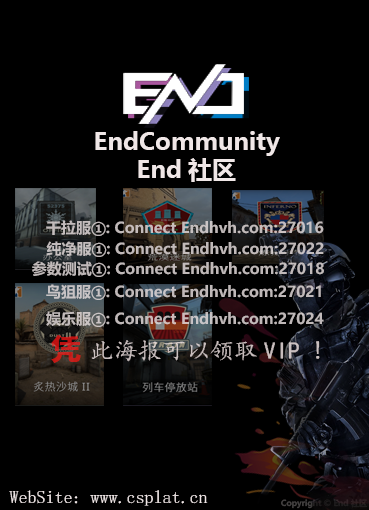
<style>
.page{position:relative;width:369px;height:510px;background:#000000}
.page>*{position:absolute;margin:0}
.t1{font:24px "MicrosoftYaHei-Bold";color:#f0e7e7}
.t2{font:15px "MicrosoftYaHei-Bold";color:#c3bbbb}
.t3{font:15px "MicrosoftYaHei-Bold";color:#c1baba}
.t4{font:15px "MicrosoftYaHei-Bold";color:#bfb8b8}
.t5{font:15px "MicrosoftYaHei-Bold";color:#c1b9ba}
.t6{font:24px "¿¬Ìå"}
.t7{font:30px "MicrosoftYaHei-Bold"}
.t8{font:18px "·ÂËÎ";color:#f0e7e7}
.t9{font:8px "MicrosoftYaHei-Bold";color:#2d2022}
</style>
<div class="page">
<p class="t1" style="left:95px;top:131px;width:185px;height:25px">EndCommunity</p>
<p class="t1" style="left:138px;top:158px;width:98px;height:24px">End社区</p>
<p class="t2" style="left:46px;top:220px;width:278px;height:16px">干拉服①: Connect Endhvh.com:27016</p>
<p class="t3" style="left:46px;top:241px;width:278px;height:16px">纯净服①: Connect Endhvh.com:27022</p>
<p class="t4" style="left:32px;top:261px;width:292px;height:16px">参数测试①: Connect Endhvh.com:27018</p>
<p class="t3" style="left:46px;top:284px;width:275px;height:16px">鸟狙服①: Connect Endhvh.com:27021</p>
<p class="t5" style="left:46px;top:311px;width:278px;height:16px">娱乐服①: Connect Endhvh.com:27024</p>
<p class="t6" style="left:51px;top:335px;width:269px;height:28px"><span class="t7">凭 </span>此海报可以领取VIP !</p>
<p class="t8" style="left:9px;top:490px;width:199px;height:16px">WebSite: www.csplat.cn</p>
<p class="t9" style="left:281px;top:499px;width:86px;height:10px">Copyright © End 社区</p>
</div>
